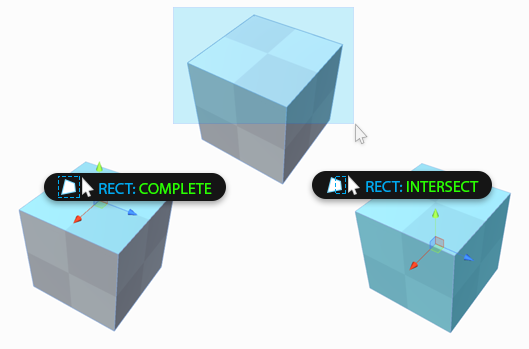
<style>
.page{position:relative;width:529px;height:349px;background:#fcfcfc}
.page>*{position:absolute;margin:0}
.t1{font:12px "MyriadPro-Regular";color:#2aff00;text-transform:uppercase}
.t2{font:12px "MyriadPro-Regular";color:#00aaef;text-transform:uppercase}
</style>
<div class="page">
<p class="t1" style="left:99px;top:183px;width:113px;height:11px"><span class="t2">RECT: </span>Complete</p>
<p class="t1" style="left:366px;top:181px;width:113px;height:11px"><span class="t2">Rect: </span>Intersect</p>
</div>
